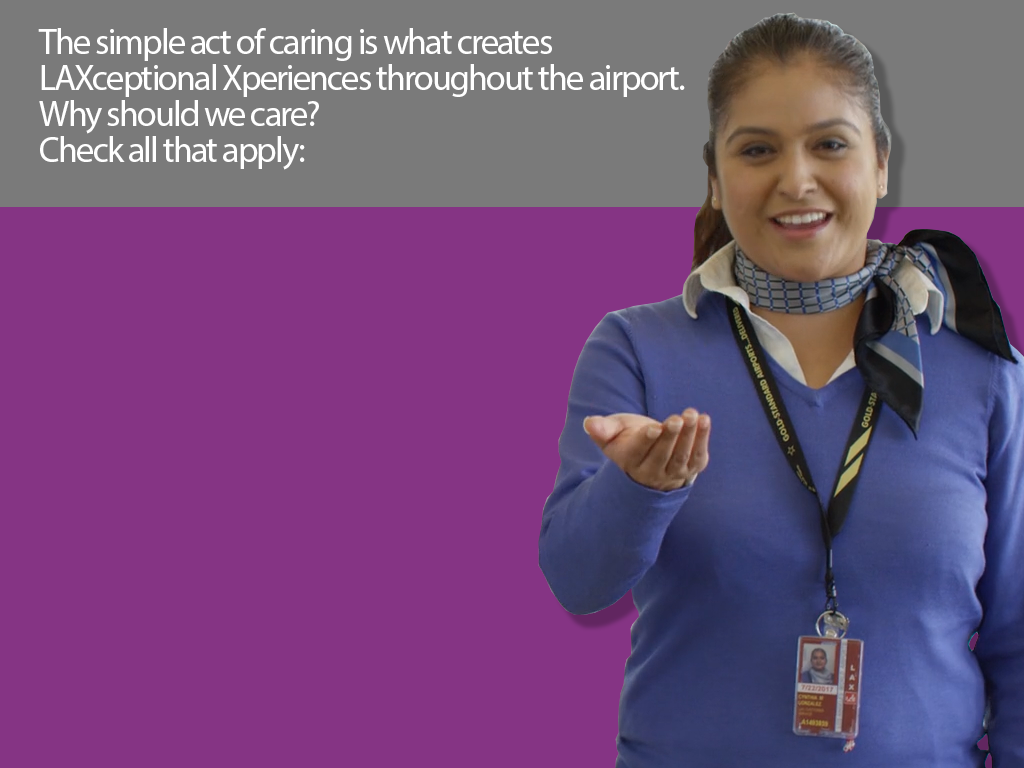
<style>
.page{position:relative;width:1024px;height:768px;background:#853484}
.page>*{position:absolute;margin:0}
.t1{font:36px/36px "MyriadPro-Regular";letter-spacing:-0.05em;color:#ffffff}
</style>
<div class="page">
<p class="t1" style="left:38px;top:28px;width:647px;height:142px">The simple act of caring is what creates  <br>LAXceptional Xperiences throughout the airport. <br>Why should we care?<br>Check all that apply:</p>
</div>
